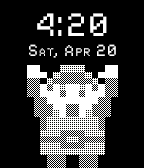
<style>
.page{position:relative;width:144px;height:168px;background:#000000}
.page>*{position:absolute;margin:0}
.t1{font:36px "00-Starmap-Truetype";color:#ffffff;text-transform:uppercase}
.t2{font:18px "00-Starmap-Truetype";color:#ffffff;font-variant:small-caps}
</style>
<div class="page">
<p class="t1" style="left:37px;top:13px;width:70px;height:23px">4:20</p>
<p class="t2" style="left:29px;top:44px;width:87px;height:14px">Sat, Apr 20</p>
</div>
